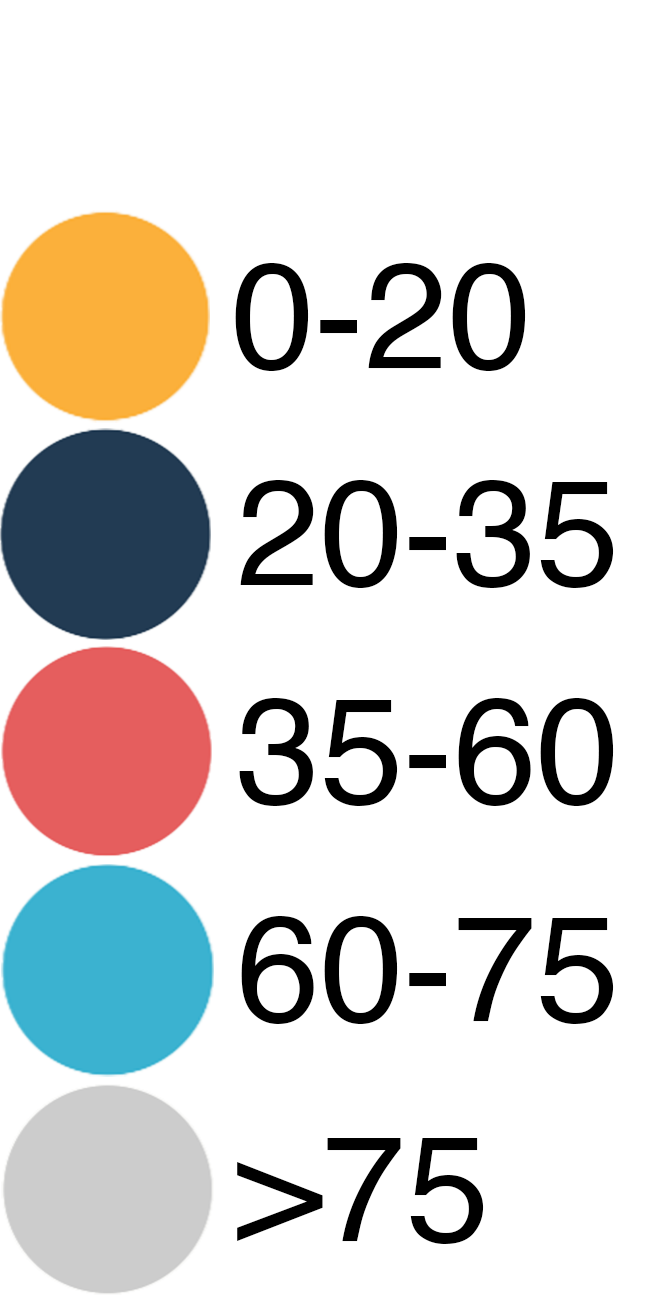
<style>
.page{position:relative;width:656px;height:1300px;background:#ffffff}
.page>*{position:absolute;margin:0}
.t1{font:150px "Helvetica";color:#000000}
</style>
<div class="page">
<p class="t1" style="left:235px;top:263px;width:291px;height:108px">0-20</p>
<p class="t1" style="left:240px;top:480px;width:374px;height:108px">20-35</p>
<p class="t1" style="left:239px;top:698px;width:375px;height:108px">35-60</p>
<p class="t1" style="left:241px;top:916px;width:373px;height:108px">60-75</p>
<p class="t1" style="left:237px;top:1138px;width:247px;height:106px">&gt;75</p>
</div>
